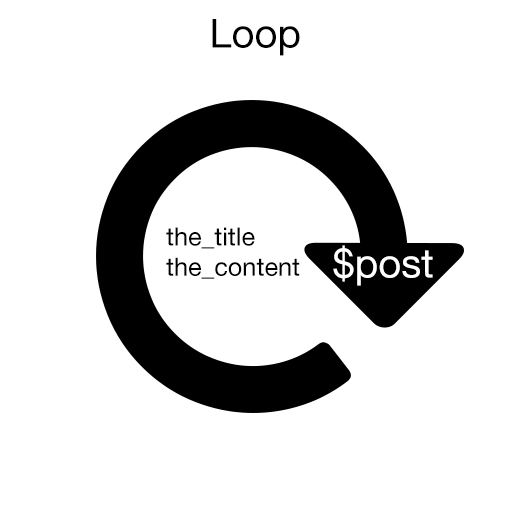
<style>
.page{position:relative;width:512px;height:512px;background:#ffffff}
.page>*{position:absolute;margin:0}
.t1{font:40px "HelveticaNeue";color:#000000}
.t2{font:25.2px "HelveticaNeue";color:#000000}
.t3{font:40px "HelveticaNeue";color:#ffffff}
</style>
<div class="page">
<p class="t1" style="left:212px;top:19px;width:88px;height:37px">Loop</p>
<p class="t2" style="left:166px;top:227px;width:134px;height:52px">the_title<br>the_content</p>
<p class="t3" style="left:333px;top:245px;width:100px;height:41px">$post</p>
</div>
